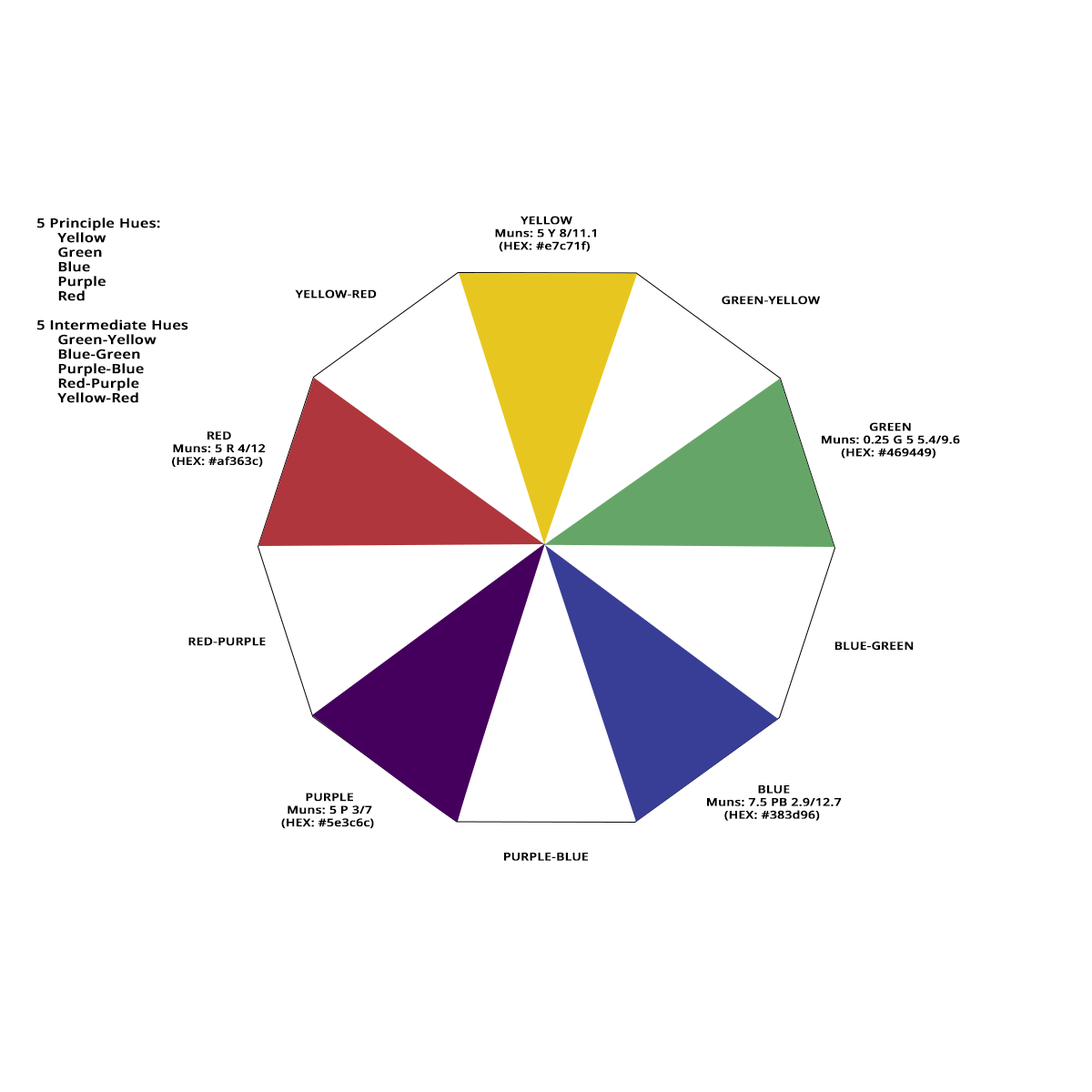
<style>
.page{position:relative;width:1092px;height:1092px;background:#ffffff}
.page>*{position:absolute;margin:0}
.t1{font:12.7px/14.6px "OpenSans-Semibold";color:#000000;font-weight:bold;scale:1.15 1}
.t2{font:10.9px/12.7px "OpenSans-Semibold";color:#000000;font-weight:bold;scale:1.15 1}
.t3{font:10.9px "OpenSans-Semibold";color:#000000;font-weight:bold;scale:1.15 1}
</style>
<div class="page">
<p class="t1" style="left:37px;top:217px;width:151px;height:186px">5 Principle Hues:<br>     Yellow<br>     Green<br>     Blue<br>     Purple<br>     Red<br><br>5 Intermediate Hues<br>     Green-Yellow<br>     Blue-Green<br>     Purple-Blue<br>     Red-Purple<br>     Yellow-Red</p>
<p class="t2" style="left:495px;top:216px;width:101px;height:36px;text-align:center">YELLOW<br>Muns: 5 Y 8/11.1<br>(HEX: #e7c71f)</p>
<p class="t3" style="left:295px;top:289px;width:82px;height:9px">YELLOW-RED</p>
<p class="t3" style="left:722px;top:296px;width:98px;height:9px">GREEN-YELLOW</p>
<p class="t2" style="left:822px;top:422px;width:138px;height:37px;text-align:center">GREEN<br>Muns: 0.25 G 5 5.4/9.6<br>(HEX: #469449)</p>
<p class="t2" style="left:172px;top:431px;width:94px;height:36px;text-align:center">RED<br>Muns: 5 R 4/12<br>(HEX: #af363c)</p>
<p class="t3" style="left:188px;top:637px;width:78px;height:9px">RED-PURPLE</p>
<p class="t3" style="left:834px;top:642px;width:80px;height:8px">BLUE-GREEN</p>
<p class="t2" style="left:707px;top:785px;width:135px;height:36px;text-align:center">BLUE<br>Muns: 7.5 PB 2.9/12.7<br>(HEX: #383d96)</p>
<p class="t2" style="left:281px;top:793px;width:93px;height:36px;text-align:center">PURPLE<br>Muns: 5 P 3/7<br>(HEX: #5e3c6c)</p>
<p class="t3" style="left:504px;top:853px;width:84px;height:8px">PURPLE-BLUE</p>
</div>
